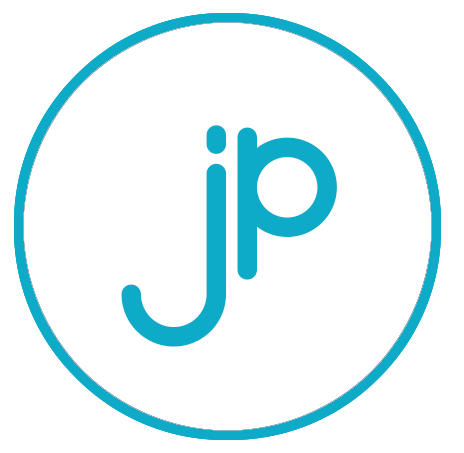
<style>
.page{position:relative;width:464px;height:453px;background:#ffffff}
.page>*{position:absolute;margin:0}
.t1{font:216px "MOONKNIGHTRegular";color:#0dabc7;font-weight:bold}
.t2{font:216px "MOONKNIGHTRegular";color:#00ffff}
</style>
<div class="page">
<p class="t1" style="left:121px;top:125px;width:216px;height:222px"><span class="t2"> </span> JP</p>
</div>
